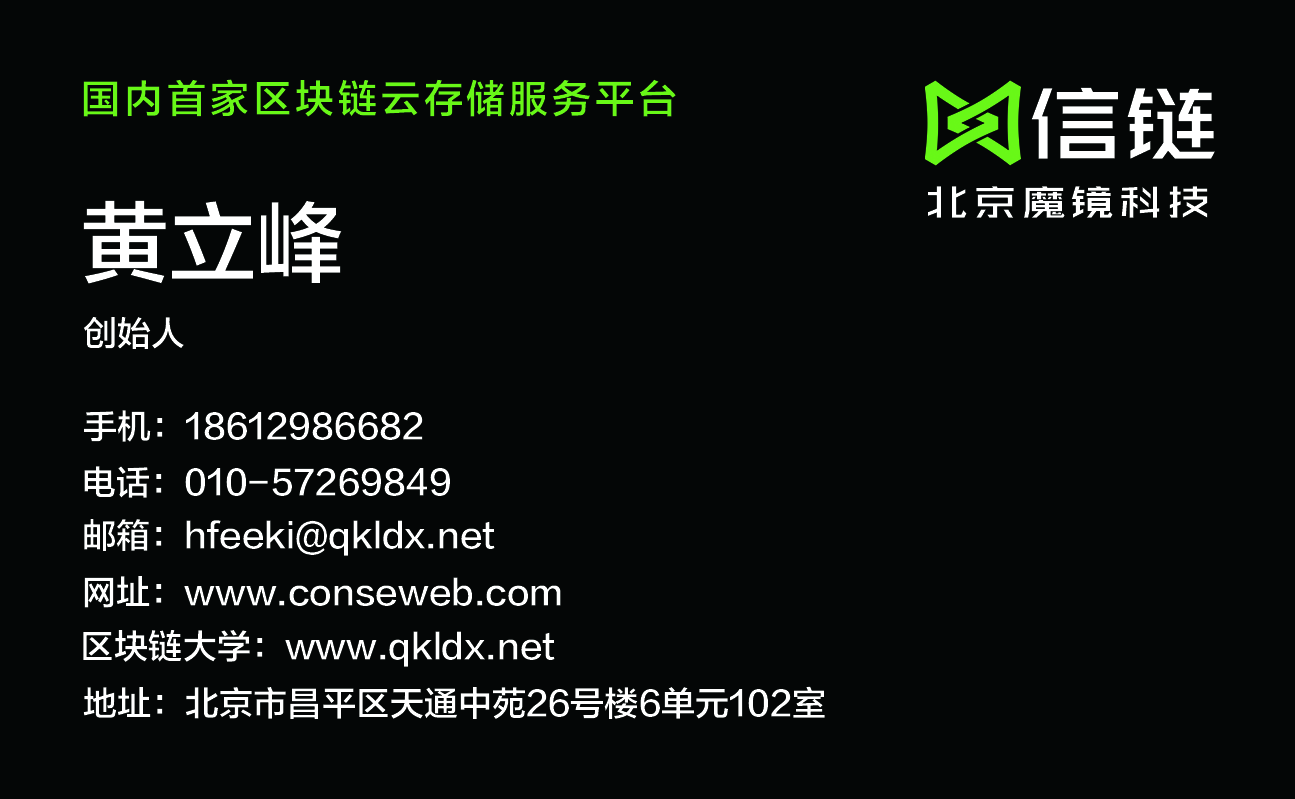
<style>
.page{position:relative;width:1295px;height:799px;background:#040606}
.page>*{position:absolute;margin:0}
.t1{font:38.9px "FZLTZHK--GBK1-0";letter-spacing:0.1em;color:#68f817}
.t2{font:87.5px "REEJI-BigYoung-BoldGB2.0";color:#ffffff;scale:1.09 1}
.t3{font:38.9px "REEJI-BigYoung-BoldGB2.0";letter-spacing:0.1em;color:#ffffff;scale:1.13 1}
.t4{font:87.5px "FZLTZHK--GBK1-0";color:#ffffff}
.t5{font:34px "FZLTZHK--GBK1-0";color:#ffffff}
</style>
<div class="page">
<p class="t1" style="left:83px;top:79px;width:593px;height:38px">国内首家区块链云存储服务平台</p>
<p class="t2" style="left:1031px;top:87px;width:184px;height:72px">信链</p>
<p class="t3" style="left:928px;top:186px;width:280px;height:32px">北京魔镜科技</p>
<p class="t4" style="left:83px;top:200px;width:259px;height:84px">黄立峰</p>
<p class="t5" style="left:83px;top:317px;width:101px;height:32px">创始人</p>
<p class="t5" style="left:84px;top:410px;width:339px;height:32px">手机：18612986682</p>
<p class="t5" style="left:84px;top:466px;width:366px;height:32px">电话：010-57269849</p>
<p class="t5" style="left:84px;top:519px;width:411px;height:37px">邮箱：hfeeki@qkldx.net</p>
<p class="t5" style="left:84px;top:576px;width:477px;height:32px">网址：www.conseweb.com</p>
<p class="t5" style="left:83px;top:630px;width:472px;height:37px">区块链大学：www.qkldx.net</p>
<p class="t5" style="left:83px;top:686px;width:742px;height:33px">地址：北京市昌平区天通中苑26号楼6单元102室</p>
</div>
